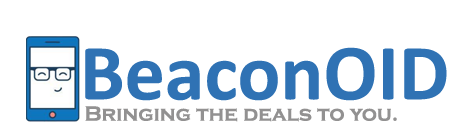
<style>
.page{position:relative;width:456px;height:132px;background:#ffffff}
.page>*{position:absolute;margin:0}
.t1{font:80px "Calibri-Bold";color:#2f72b4}
.t2{font:21.3px "CopperplateGothic-Bold";color:#929191}
</style>
<div class="page">
<p class="t1" style="left:85px;top:47px;width:362px;height:54px">BeaconOID</p>
<p class="t2" style="left:85px;top:106px;width:312px;height:16px">Bringing the deals to you.</p>
</div>
